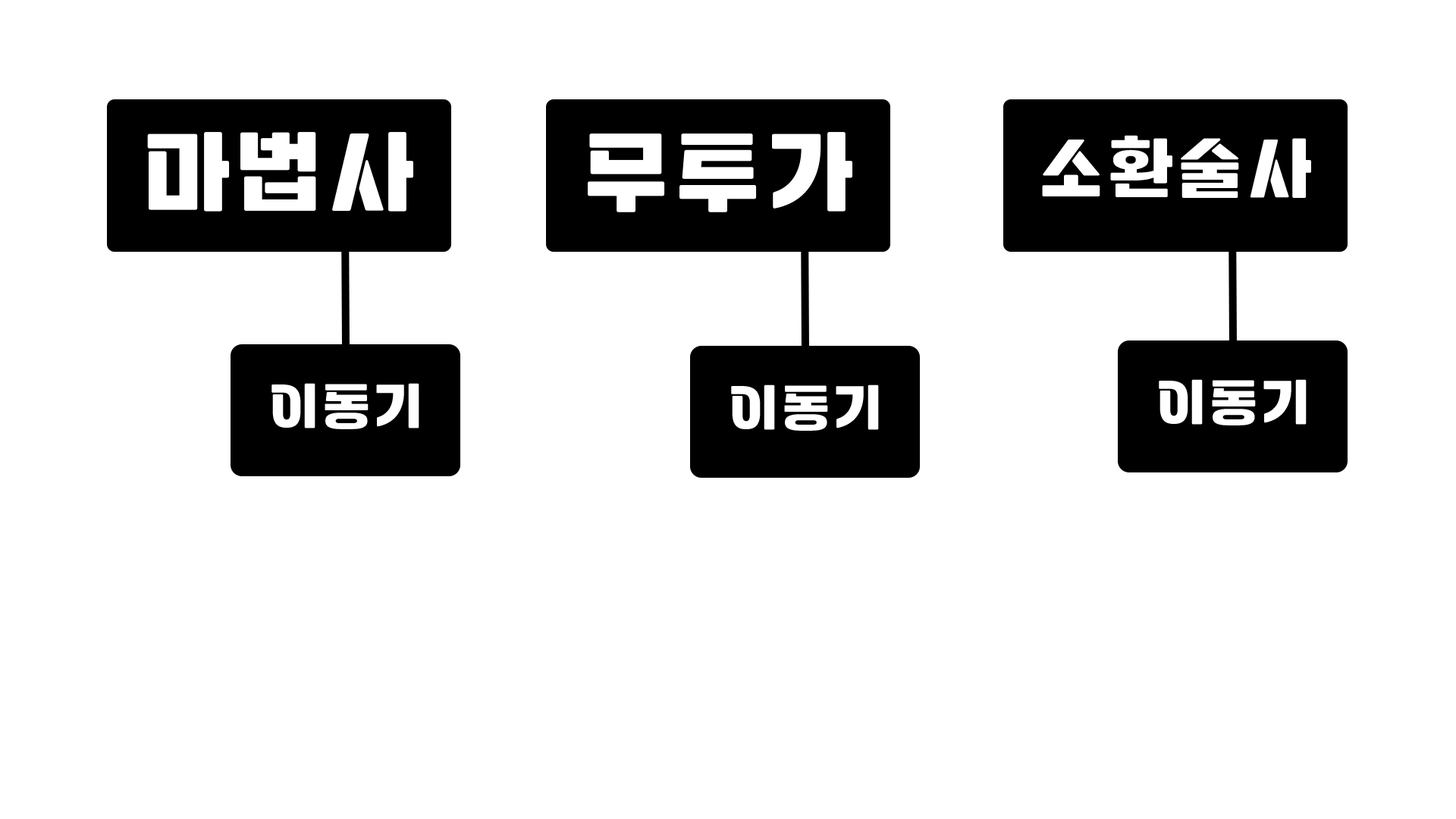
<style>
.page{position:relative;width:1456px;height:819px;background:#ffffff}
.page>*{position:absolute;margin:0}
.t1{font:97.1px "Tenada";letter-spacing:0.07em;color:#ffffff}
.t2{font:72.8px "Tenada";letter-spacing:0.07em;color:#ffffff}
.t3{font:54.6px "Tenada";letter-spacing:0.07em;color:#ffffff}
</style>
<div class="page">
<p class="t1" style="left:147px;top:132px;width:266px;height:80px">마법사</p>
<p class="t1" style="left:588px;top:132px;width:264px;height:80px">무투가</p>
<p class="t2" style="left:1042px;top:135px;width:269px;height:63px">소환술사</p>
<p class="t3" style="left:271px;top:383px;width:148px;height:46px">이동기</p>
<p class="t3" style="left:731px;top:384px;width:148px;height:47px">이동기</p>
<p class="t3" style="left:1159px;top:379px;width:148px;height:46px">이동기</p>
</div>
